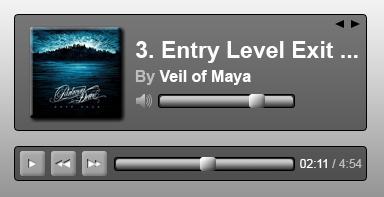
<style>
.page{position:relative;width:384px;height:197px}
.page>*{position:absolute;margin:0}
.t1{font:23px "Arial-BoldMT";color:#fdfdfd}
.t2{font:16px "Arial-BoldMT";color:#fdfdfd}
.t3{font:16px "Arial-BoldMT";color:#bebebe}
.t4{font:12px "ArialMT";color:#bebebe}
.t5{font:12px "ArialMT";color:#ffffff}
</style>
<div class="page">
<p class="t1" style="left:136px;top:41px;width:222px;height:22px">3. Entry Level Exit ...</p>
<p class="t2" style="left:135px;top:70px;width:116px;height:15px"><span class="t3">By </span>Veil of Maya</p>
<p class="t4" style="left:300px;top:159px;width:62px;height:9px"><span class="t5">02:11 </span>/ 4:54</p>
</div>
